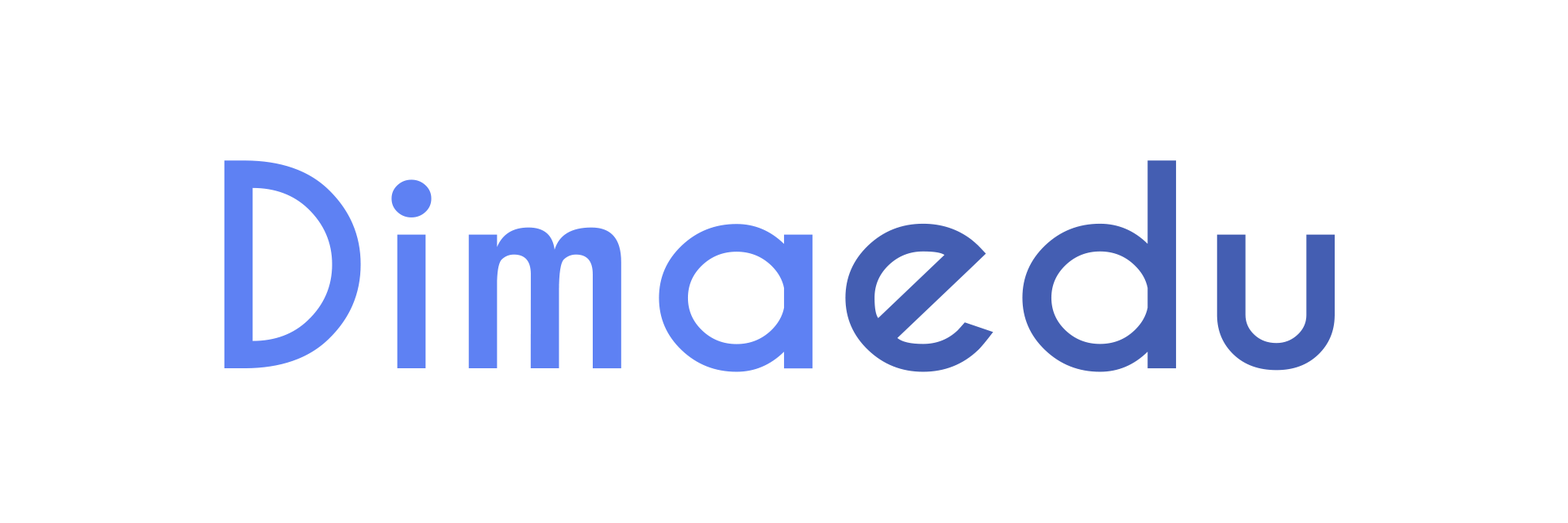
<style>
.page{position:relative;width:1568px;height:523px;background:#ffffff}
.page>*{position:absolute;margin:0}
.t1{font:265.6px "CaviarDreams-Bold";color:#5e81f3;scale:1.05 1}
.t2{font:265.6px "CaviarDreams-Bold";color:#445eb2;scale:1.05 1}
</style>
<div class="page">
<p class="t1" style="left:224px;top:160px;width:1111px;height:212px">Dima<span class="t2">edu</span></p>
</div>
